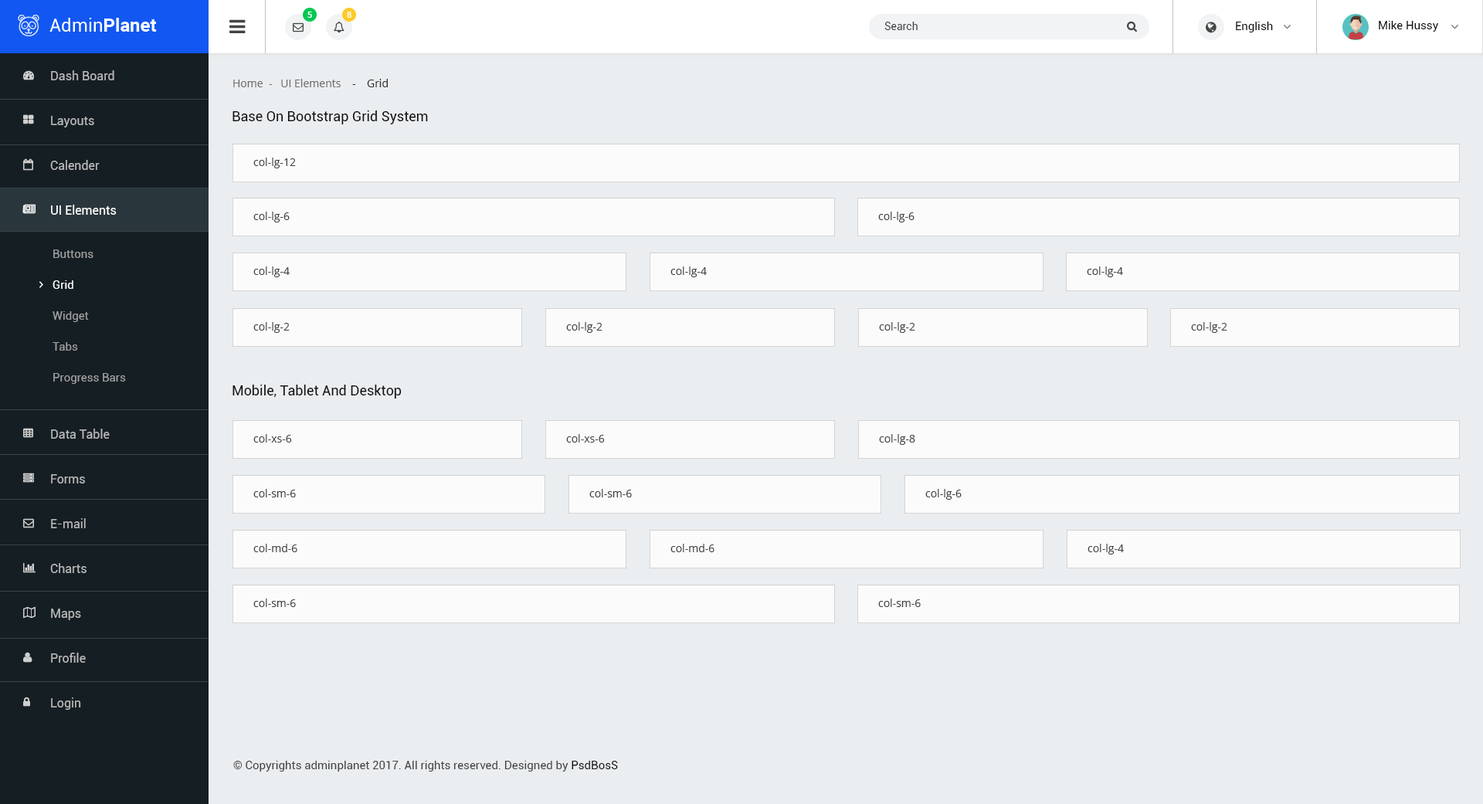
<style>
.page{position:relative;width:1483px;height:804px;background:#ebeef0}
.page>*{position:absolute;margin:0}
.t1{font:8.5px "OpenSans-Semibold";color:#ffffff}
.t2{font:10.8px "Roboto-Regular";color:#444444}
.t3{font:11.6px "Roboto-Regular";color:#111111}
.t4{font:12.4px/44.8px "Roboto-Regular";color:#b9b9b9}
.t5{font:12.4px/44.8px "Roboto-Regular";color:#ffffff}
.t6{font:10.8px "OpenSans";color:#707070}
.t7{font:10.8px "OpenSans";color:#333333}
.t8{font:13.9px "Roboto-Regular";color:#111111}
.t9{font:10.8px "OpenSans";color:#444444}
.t10{font:11.6px/30.9px "Roboto-Regular";color:#a0a0a0}
.t11{font:11.6px/30.9px "Roboto-Regular";color:#ffffff}
.t12{font:11.6px "Roboto-Regular";color:#444444}
</style>
<div class="page">
<p class="t1" style="left:307px;top:12px;width:5px;height:6px">5</p>
<p class="t1" style="left:347px;top:12px;width:4px;height:6px">8</p>
<p class="t2" style="left:884px;top:22px;width:34px;height:8px">Search</p>
<p class="t3" style="left:1236px;top:22px;width:37px;height:10px">English</p>
<p class="t3" style="left:1379px;top:21px;width:59px;height:11px">Mike Hussy</p>
<p class="t4" style="left:50px;top:70px;width:67px;height:640px">Dash Board<br>Layouts<br>Calender<br><span class="t5">UI Elements<br></span><br><br><br><br>Data Table<br>Forms<br>E-mail<br>Charts<br>Maps<br>Profile<br>Login</p>
<p class="t6" style="left:233px;top:79px;width:155px;height:8px">Home  -   UI Elements   <span class="t7"> -    Grid</span></p>
<p class="t8" style="left:232px;top:110px;width:196px;height:14px">Base On Bootstrap Grid System</p>
<p class="t9" style="left:253px;top:158px;width:43px;height:10px">col-lg-12</p>
<p class="t9" style="left:253px;top:212px;width:37px;height:10px">col-lg-6</p>
<p class="t9" style="left:878px;top:212px;width:37px;height:10px">col-lg-6</p>
<p class="t10" style="left:53px;top:249px;width:73px;height:135px">Buttons<br><span class="t11">Grid<br></span>Widget<br>Tabs<br>Progress Bars</p>
<p class="t9" style="left:253px;top:266px;width:37px;height:11px">col-lg-4</p>
<p class="t9" style="left:670px;top:266px;width:37px;height:11px">col-lg-4</p>
<p class="t9" style="left:1087px;top:266px;width:36px;height:11px">col-lg-4</p>
<p class="t9" style="left:253px;top:322px;width:37px;height:11px">col-lg-2</p>
<p class="t9" style="left:566px;top:322px;width:36px;height:11px">col-lg-2</p>
<p class="t9" style="left:879px;top:322px;width:36px;height:11px">col-lg-2</p>
<p class="t9" style="left:1191px;top:322px;width:36px;height:11px">col-lg-2</p>
<p class="t8" style="left:232px;top:385px;width:170px;height:14px">Mobile, Tablet And Desktop</p>
<p class="t9" style="left:253px;top:434px;width:39px;height:9px">col-xs-6</p>
<p class="t9" style="left:566px;top:434px;width:39px;height:9px">col-xs-6</p>
<p class="t9" style="left:879px;top:434px;width:36px;height:11px">col-lg-8</p>
<p class="t9" style="left:253px;top:489px;width:43px;height:8px">col-sm-6</p>
<p class="t9" style="left:589px;top:489px;width:43px;height:8px">col-sm-6</p>
<p class="t9" style="left:925px;top:489px;width:37px;height:11px">col-lg-6</p>
<p class="t9" style="left:253px;top:544px;width:44px;height:8px">col-md-6</p>
<p class="t9" style="left:670px;top:544px;width:44px;height:8px">col-md-6</p>
<p class="t9" style="left:1088px;top:544px;width:36px;height:11px">col-lg-4</p>
<p class="t9" style="left:253px;top:599px;width:43px;height:8px">col-sm-6</p>
<p class="t9" style="left:878px;top:599px;width:43px;height:8px">col-sm-6</p>
<p class="t12" style="left:233px;top:761px;width:385px;height:11px">© Copyrights adminplanet 2017. All rights reserved. Designed by <span class="t3">PsdBosS</span></p>
</div>
